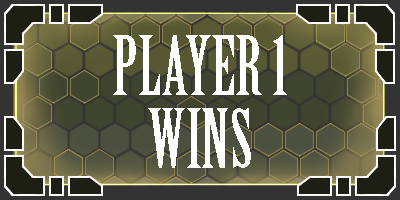
<style>
.page{position:relative;width:400px;height:200px}
.page>*{position:absolute;margin:0}
.t1{font:80px "BirchStd";color:#ffffff}
</style>
<div class="page">
<p class="t1" style="left:113px;top:35px;width:174px;height:60px">PLAYER 1</p>
<p class="t1" style="left:148px;top:108px;width:103px;height:60px">WINS</p>
</div>
